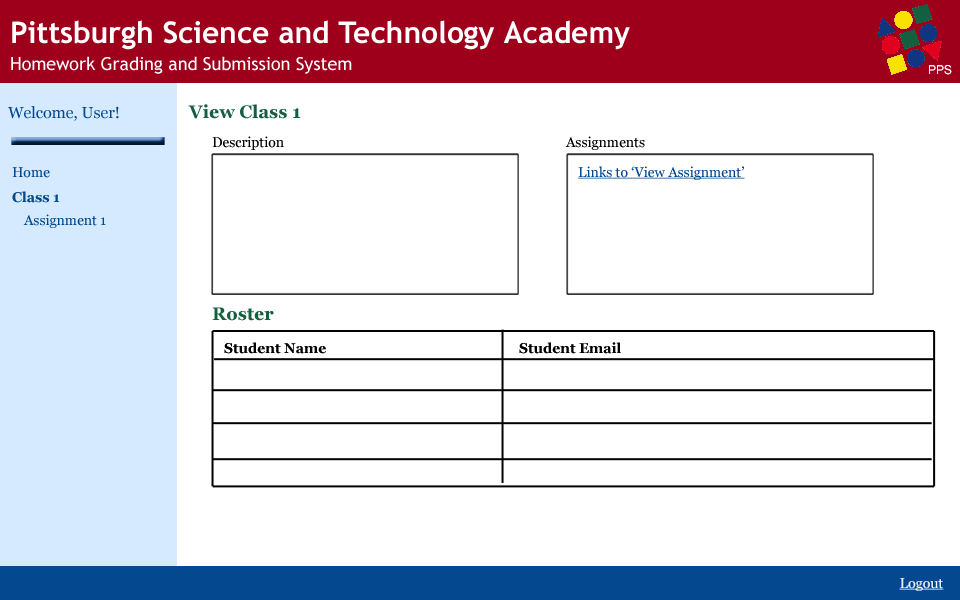
<style>
.page{position:relative;width:960px;height:600px;background:#ffffff}
.page>*{position:absolute;margin:0}
.t1{font:15.9px "Georgia";color:#044990}
.t2{font:17.9px "Georgia-Bold";color:#145f40}
.t3{font:13.9px "Georgia";color:#000000}
.t4{font:13.9px "Georgia";color:#044990}
.t5{font:13.9px "Georgia";color:#044990;text-decoration:underline}
.t6{font:13.9px "Georgia-Bold";color:#044990}
.t7{font:13.9px "Georgia-Bold";color:#000000}
</style>
<div class="page">
<p class="t1" style="left:8px;top:106px;width:111px;height:15px">Welcome, User!</p>
<p class="t2" style="left:188px;top:104px;width:113px;height:15px">View Class 1</p>
<p class="t3" style="left:212px;top:136px;width:72px;height:14px">Description</p>
<p class="t3" style="left:565px;top:136px;width:80px;height:14px">Assignments</p>
<p class="t4" style="left:12px;top:167px;width:38px;height:11px">Home</p>
<p class="t5" style="left:578px;top:166px;width:167px;height:14px">Links to ‘View Assignment’</p>
<p class="t6" style="left:12px;top:191px;width:48px;height:12px">Class 1</p>
<p class="t4" style="left:23px;top:214px;width:83px;height:14px">Assignment 1</p>
<p class="t2" style="left:212px;top:307px;width:62px;height:14px">Roster</p>
<p class="t7" style="left:224px;top:342px;width:102px;height:12px">Student Name</p>
<p class="t7" style="left:519px;top:342px;width:102px;height:12px">Student Email</p>
</div>
